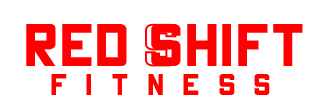
<style>
.page{position:relative;width:320px;height:100px;background:#ffffff}
.page>*{position:absolute;margin:0}
.t1{font:60px "THECHAMPRegular";color:#ff0000}
.t2{font:60px "THECHAMPStroke";color:#ff0000}
.t3{font:30px "THECHAMPRegular";color:#ff0000}
</style>
<div class="page">
<p class="t1" style="left:26px;top:24px;width:277px;height:42px">Red shift</p>
<p class="t2" style="left:145px;top:23px;width:32px;height:44px">s</p>
<p class="t3" style="left:51px;top:74px;width:219px;height:21px">f  i  t  n  e  s  s</p>
</div>
